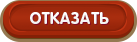
<style>
.page{position:relative;width:137px;height:42px}
.page>*{position:absolute;margin:0}
.t1{font:16px "RotondaC-Bold";letter-spacing:0.04em;color:#ffffff;text-transform:uppercase}
</style>
<div class="page">
<p class="t1" style="left:30px;top:12px;width:79px;height:12px">отказать</p>
</div>
